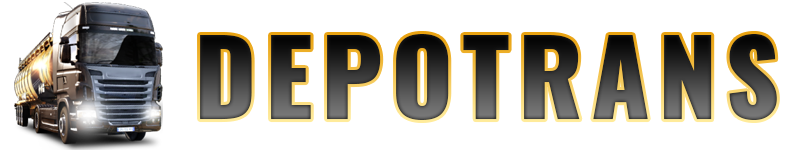
<style>
.page{position:relative;width:800px;height:150px;background:#ffffff}
.page>*{position:absolute;margin:0}
.t1{font:103.8px "Oswald-Heavy";letter-spacing:0.08em}
</style>
<div class="page">
<p class="t1" style="left:200px;top:34px;width:577px;height:86px">DEPOTRANS</p>
</div>
